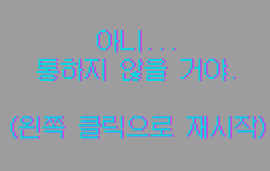
<style>
.page{position:relative;width:270px;height:171px;background:#9d9d9f}
.page>*{position:absolute;margin:0}
.t1{font:24px "GalmuriMono11-Regular";color:#09d6da}
.t2{font:24px "GalmuriMono11-Regular"}
</style>
<div class="page">
<p class="t1" style="left:10px;top:30px;width:255px;height:109px;text-align:center">아니...<br>통하지 않을 거야.<br><br>(왼쪽 클릭으로 재시작)</p>
<p class="t2" style="left:11px;top:30px;width:255px;height:109px;text-align:center">아니...<br>통하지 않을 거야.<br><br>(왼쪽 클릭으로 재시작)</p>
</div>
